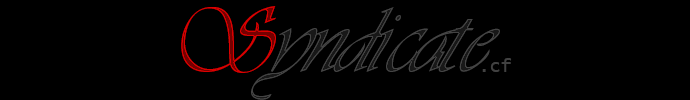
<style>
.page{position:relative;width:690px;height:100px;background:#000000}
.page>*{position:absolute;margin:0}
.t1{font:89.1px "Astrania";scale:0.91 1}
.t2{font:18px "LucidaConsole";color:#414141}
</style>
<div class="page">
<p class="t1" style="left:181px;top:6px;width:95px;height:67px">S</p>
<p class="t1" style="left:251px;top:7px;width:249px;height:93px">yndicate</p>
<p class="t2" style="left:482px;top:58px;width:30px;height:14px">.cf</p>
</div>
